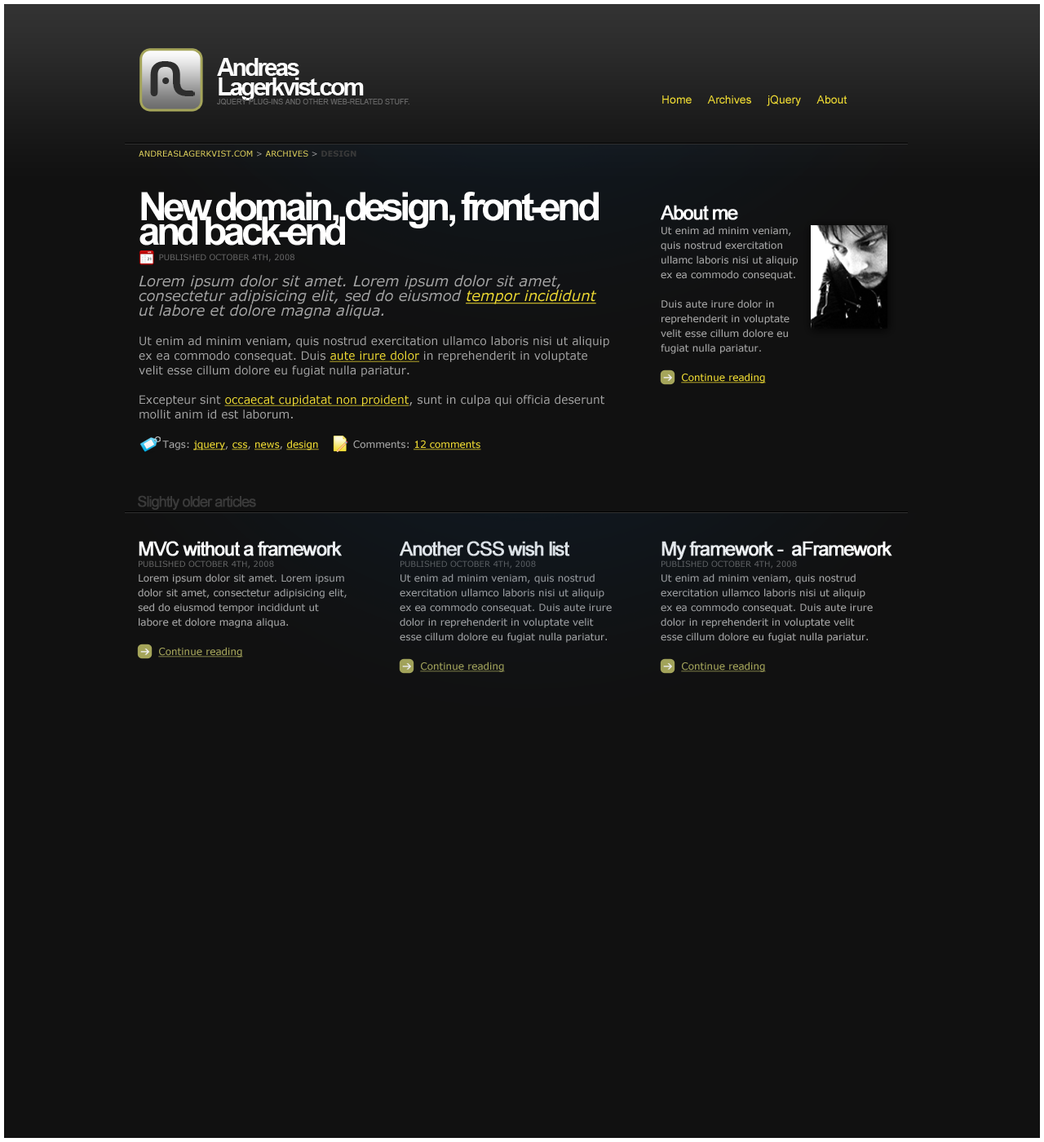
<style>
.page{position:relative;width:1044px;height:1142px;background:#111111}
.page>*{position:absolute;margin:0}
.t1{font:7.3px/9px "ArialMT";color:#656565;text-transform:uppercase}
.t2{font:24.5px/19.6px "Arial-BoldMT";letter-spacing:-0.1em;color:#fefefe}
.t3{font:11.4px "ArialMT";color:#efdb32}
.t4{font:8.2px "Verdana";color:#dfd15c;text-transform:uppercase}
.t5{font:8.2px "Verdana";color:#a5a5a5;text-transform:uppercase}
.t6{font:8.2px "Verdana-Bold";color:#383838;text-transform:uppercase}
.t7{font:11.4px/14.7px "Verdana";color:#a5a5a5}
.t8{font:39.2px/24.5px "Arial-BoldMT";letter-spacing:-0.1em;color:#ffffff}
.t9{font:8.2px/15.5px "Verdana";color:#666666;text-transform:uppercase}
.t10{font:14.7px/14.7px "Verdana-Italic";color:#a5a5a5}
.t11{font:14.7px/14.7px "Verdana-Italic";color:#efdb32;text-decoration:underline}
.t12{font:11.4px/14.7px "Verdana";color:#efdb32;text-decoration:underline}
.t13{font:9.8px/14.7px "Verdana";color:#a5a5a5}
.t14{font:9.8px/14.7px "Verdana";color:#efdb32;text-decoration:underline}
.t15{font:19.6px/19.6px "ArialMT";letter-spacing:-0.075em;color:#ffffff;font-weight:bold}
.t16{font:14.7px "ArialMT";letter-spacing:-0.075em;color:#3a3a3a;font-weight:bold}
.t17{font:8.2px/11.4px "Verdana";color:#666666;text-transform:uppercase}
.t18{font:9.8px/14.7px "Verdana";color:#a5a55a;text-decoration:underline}
.t19{font:9.8px/14.7px "Verdana"}
.t20{font:19.6px/19.6px "ArialMT";letter-spacing:-0.075em;font-weight:bold}
.t21{font:8.2px/11.4px "Verdana";text-transform:uppercase}
.t22{font:9.8px/14.7px "Verdana";text-decoration:underline}
</style>
<div class="page">
<p class="t1" style="left:217px;top:58px;width:192px;height:47px"><span class="t2">Andreas<br>Lagerkvist.com<br></span>jQuery plug-ins and other web-related stuff.</p>
<p class="t3" style="left:662px;top:95px;width:186px;height:11px">Home     Archives     jQuery     About</p>
<p class="t4" style="left:139px;top:150px;width:217px;height:7px">AndreasLagerkvist.com<span class="t5"> &gt; </span>Archives <span class="t5">&gt; </span><span class="t6">design</span></p>
<p class="t7" style="left:139px;top:192px;width:470px;height:258px"><span class="t8">New domain, design, front-end <br>and back-end<br></span><span class="t9">       Published October 4th, 2008<br><br></span><span class="t10">Lorem ipsum dolor sit amet. Lorem ipsum dolor sit amet, <br>consectetur adipisicing elit, sed do eiusmod </span><span class="t11">tempor incididunt <br></span><span class="t10">ut labore et dolore magna aliqua.<br><br></span>Ut enim ad minim veniam, quis nostrud exercitation ullamco laboris nisi ut aliquip<br>ex ea commodo consequat. Duis <span class="t12">aute irure dolor</span> in reprehenderit in voluptate<br>velit esse cillum dolore eu fugiat nulla pariatur.<br><br>Excepteur sint <span class="t12">occaecat cupidatat non proident</span>, sunt in culpa qui officia deserunt<br>mollit anim id est laborum.<br><br><span class="t13">       Tags: </span><span class="t14">jquery</span><span class="t13">, </span><span class="t14">css</span><span class="t13">, </span><span class="t14">news</span><span class="t13">, </span><span class="t14">design</span><span class="t13">          Comments: </span><span class="t14">12 comments</span></p>
<p class="t13" style="left:661px;top:205px;width:137px;height:178px"><span class="t15">About me<br></span>Ut enim ad minim veniam, <br>quis nostrud exercitation<br>ullamc laboris nisi ut aliquip<br>ex ea commodo consequat.<br><br>Duis aute irure dolor in <br>reprehenderit in voluptate <br>velit esse cillum dolore eu<br>fugiat nulla pariatur.<br><br>      <span class="t14">Continue reading</span></p>
<p class="t16" style="left:138px;top:495px;width:118px;height:15px">Slightly older articles</p>
<p class="t13" style="left:138px;top:541px;width:209px;height:116px"><span class="t15">MVC without a framework<br></span><span class="t17">Published October 4th, 2008<br></span>Lorem ipsum dolor sit amet. Lorem ipsum<br>dolor sit amet, consectetur adipisicing elit,<br>sed do eiusmod tempor incididunt ut<br>labore et dolore magna aliqua.<br><br>      <span class="t18">Continue reading</span></p>
<p class="t19" style="left:400px;top:541px;width:212px;height:131px"><span class="t20">Another CSS wish list<br></span><span class="t21">Published October 4th, 2008<br></span>Ut enim ad minim veniam, quis nostrud<br>exercitation ullamco laboris nisi ut aliquip<br>ex ea commodo consequat. Duis aute irure<br>dolor in reprehenderit in voluptate velit<br>esse cillum dolore eu fugiat nulla pariatur.<br><br>      <span class="t22">Continue reading</span></p>
<p class="t13" style="left:661px;top:541px;width:231px;height:131px"><span class="t15">My framework -  aFramework<br></span><span class="t17">Published October 4th, 2008<br></span>Ut enim ad minim veniam, quis nostrud<br>exercitation ullamco laboris nisi ut aliquip<br>ex ea commodo consequat. Duis aute irure<br>dolor in reprehenderit in voluptate velit<br>esse cillum dolore eu fugiat nulla pariatur.<br><br>      <span class="t18">Continue reading</span></p>
</div>
